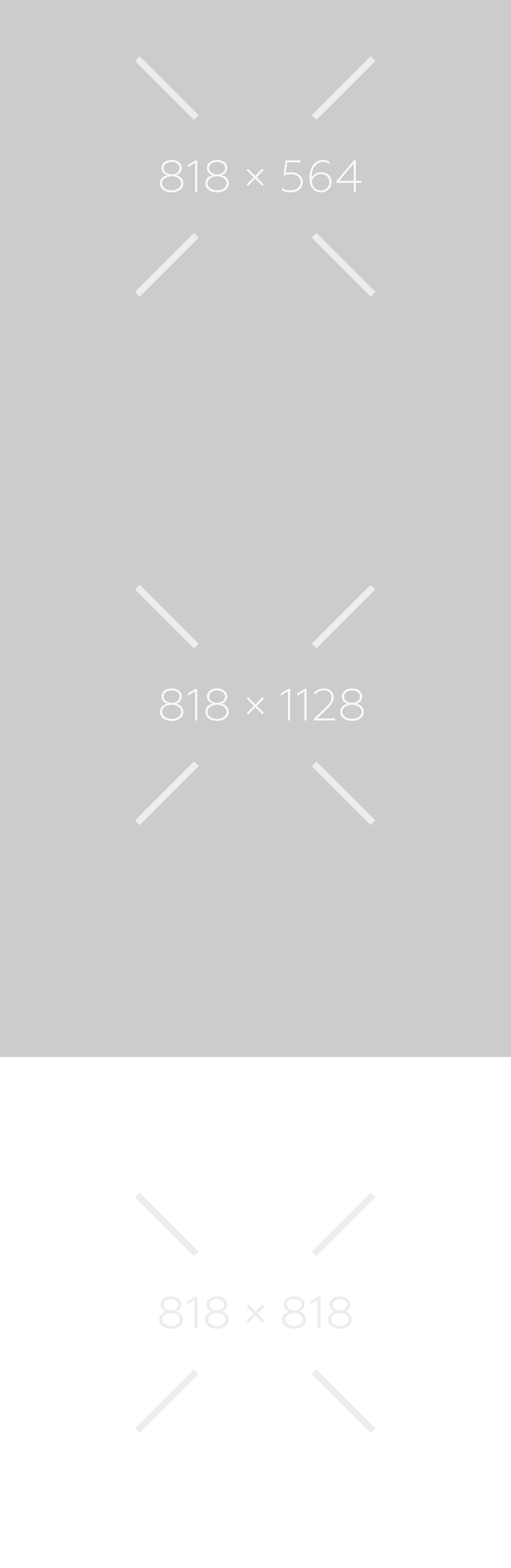
<style>
.page{position:relative;width:511px;height:1568px;background:#cccccc}
.page>*{position:absolute;margin:0}
.t1{font:45px "Geometria-Light";color:#f8f8f8}
.t2{font:45px "Geometria";color:#ededed}
</style>
<div class="page">
<p class="t1" style="left:160px;top:160px;width:202px;height:32px">818 × 564</p>
<p class="t1" style="left:160px;top:688px;width:204px;height:33px">818 × 1128</p>
<p class="t2" style="left:159px;top:1296px;width:193px;height:33px">818 × 818</p>
</div>
